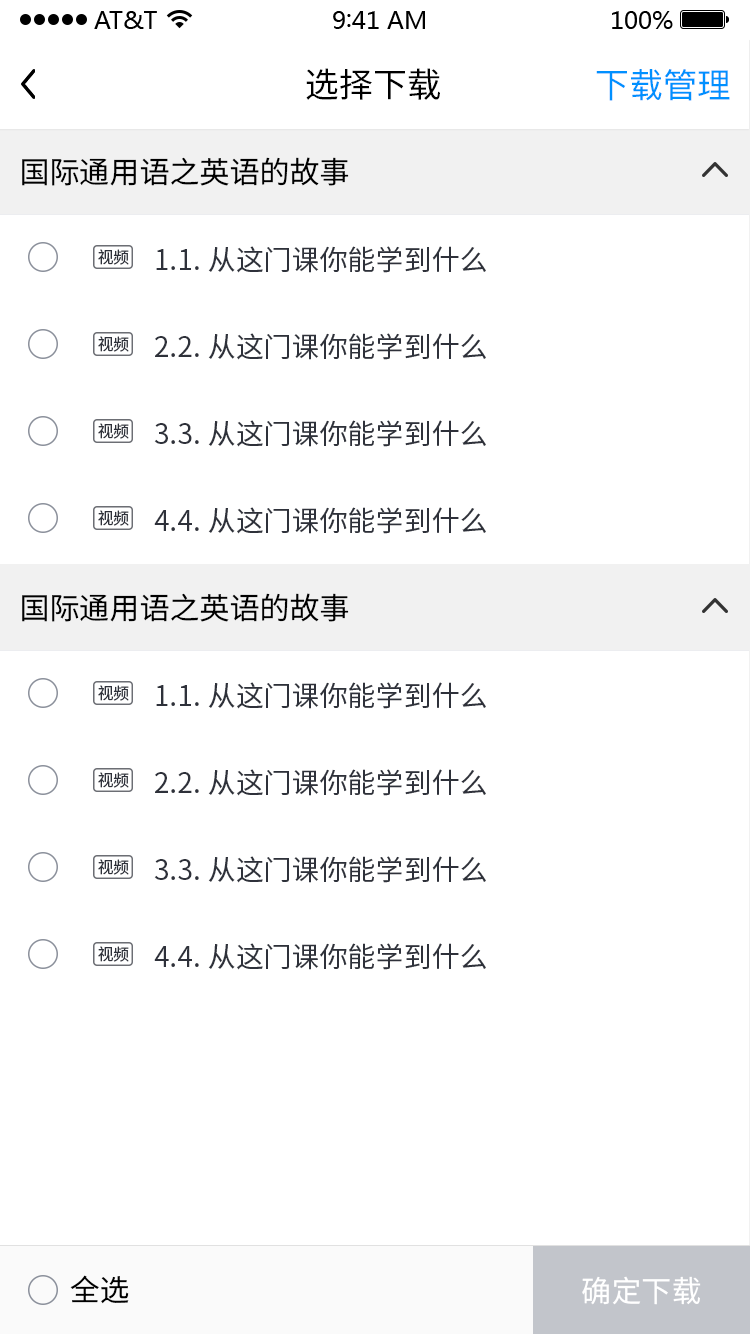
<style>
.page{position:relative;width:750px;height:1334px;background:#ffffff}
.page>*{position:absolute;margin:0}
.t1{font:34px "SourceHanSansCN-Regular";color:#000000}
.t2{font:34px "PingFang-SC-Medium";color:#0090ff}
.t3{font:30px "SourceHanSansCN-Regular";color:#000000}
.t4{font:28px "SourceHanSansCN-Regular";color:#2e313a}
.t5{font:16px "SourceHanSansCN-Regular";color:#2e313a}
.t6{font:30px "SourceHanSansCN-Regular";color:#ffffff}
</style>
<div class="page">
<p class="t1" style="left:306px;top:68px;width:134px;height:32px">选择下载</p>
<p class="t2" style="left:596px;top:69px;width:134px;height:32px">下载管理</p>
<p class="t3" style="left:22px;top:157px;width:327px;height:29px">国际通用语之英语的故事</p>
<p class="t4" style="left:156px;top:246px;width:330px;height:27px">1.1.从这门课你能学到什么</p>
<p class="t5" style="left:98px;top:249px;width:31px;height:16px">视频</p>
<p class="t5" style="left:98px;top:336px;width:31px;height:16px">视频</p>
<p class="t4" style="left:155px;top:333px;width:331px;height:27px">2.2.从这门课你能学到什么</p>
<p class="t5" style="left:98px;top:423px;width:31px;height:16px">视频</p>
<p class="t4" style="left:154px;top:420px;width:332px;height:27px">3.3.从这门课你能学到什么</p>
<p class="t5" style="left:98px;top:510px;width:31px;height:16px">视频</p>
<p class="t4" style="left:154px;top:507px;width:332px;height:27px">4.4.从这门课你能学到什么</p>
<p class="t3" style="left:22px;top:593px;width:327px;height:29px">国际通用语之英语的故事</p>
<p class="t5" style="left:98px;top:685px;width:31px;height:16px">视频</p>
<p class="t4" style="left:156px;top:682px;width:330px;height:27px">1.1.从这门课你能学到什么</p>
<p class="t5" style="left:98px;top:772px;width:31px;height:16px">视频</p>
<p class="t4" style="left:155px;top:769px;width:331px;height:27px">2.2.从这门课你能学到什么</p>
<p class="t4" style="left:154px;top:856px;width:332px;height:27px">3.3.从这门课你能学到什么</p>
<p class="t5" style="left:98px;top:859px;width:31px;height:16px">视频</p>
<p class="t5" style="left:98px;top:946px;width:31px;height:16px">视频</p>
<p class="t4" style="left:154px;top:943px;width:332px;height:27px">4.4.从这门课你能学到什么</p>
<p class="t3" style="left:70px;top:1275px;width:59px;height:29px">全选</p>
<p class="t6" style="left:582px;top:1276px;width:119px;height:29px">确定下载</p>
</div>
